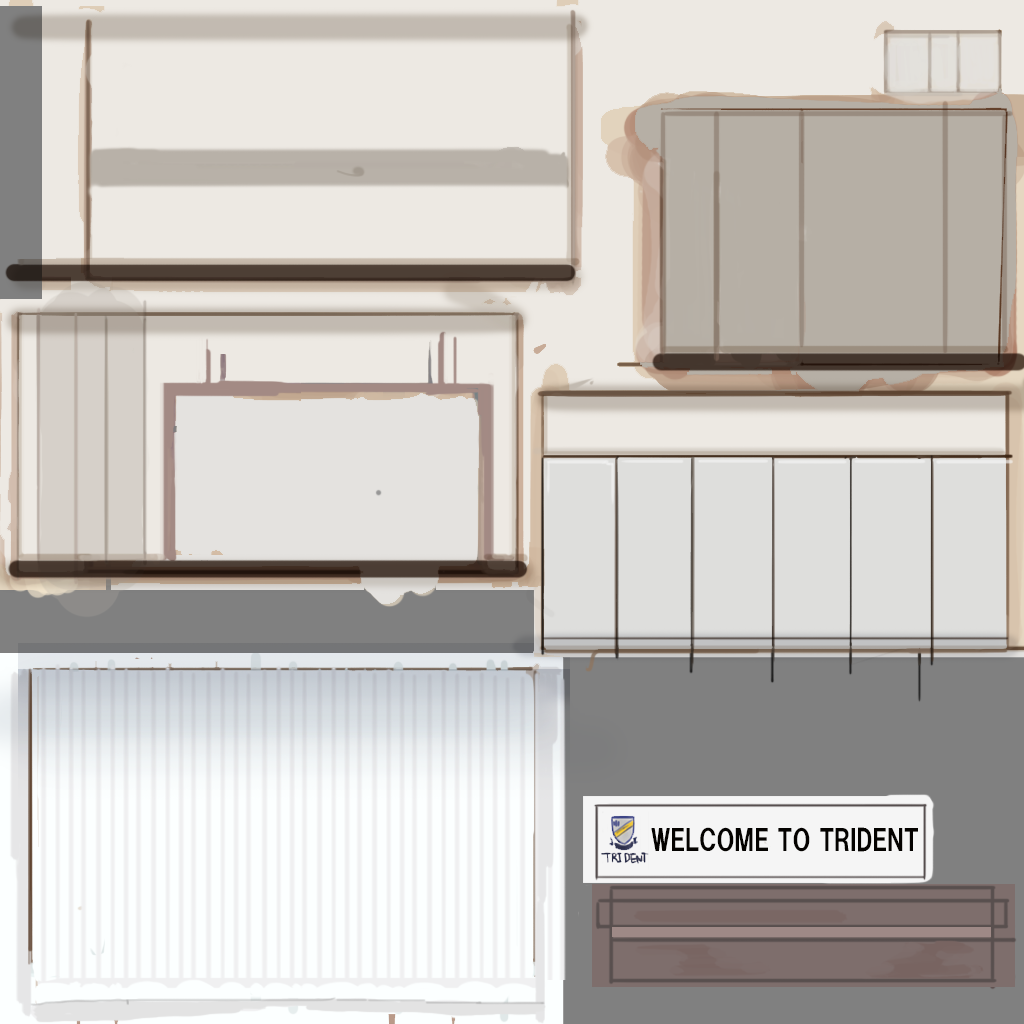
<style>
.page{position:relative;width:1024px;height:1024px}
.page>*{position:absolute;margin:0}
.t1{font:28.6px "HGPSoeiKakugothicUB";color:#040200;scale:0.94 1}
</style>
<div class="page">
<p class="t1" style="left:651px;top:827px;width:267px;height:25px">WELCOME TO TRIDENT</p>
</div>
